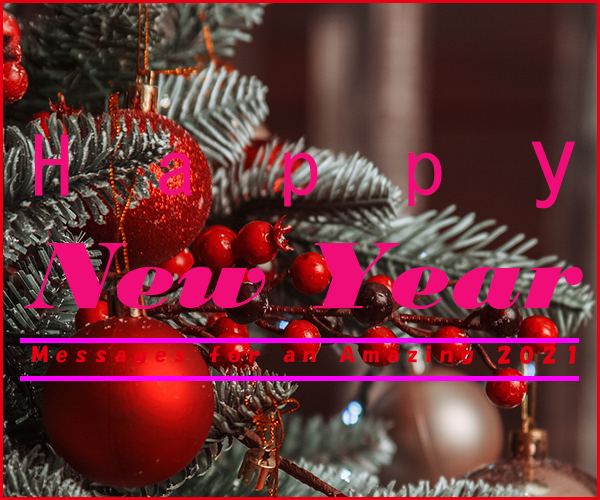
<style>
.page{position:relative;width:600px;height:500px}
.page>*{position:absolute;margin:0}
.t1{font:99.4px/115.6px "BodoniMTBlack-Italic";color:#f10d78;scale:1.04 1}
.t2{font:79.5px/115.6px "MS-Gothic";color:#f10d78;scale:1.04 1}
.t3{font:99.4px/115.6px "MS-Gothic";color:#f10d78;scale:1.04 1}
.t4{font:20px "HGSSoeiKakupoptai";color:#e60012;scale:1.15 1}
</style>
<div class="page">
<p class="t1" style="left:24px;top:134px;width:559px;height:175px;text-align:justify"><span class="t2">Happ</span><span class="t3">y<br></span>New Year</p>
<p class="t4" style="left:31px;top:345px;width:545px;height:20px">Messages for an Amazing 2021</p>
</div>
